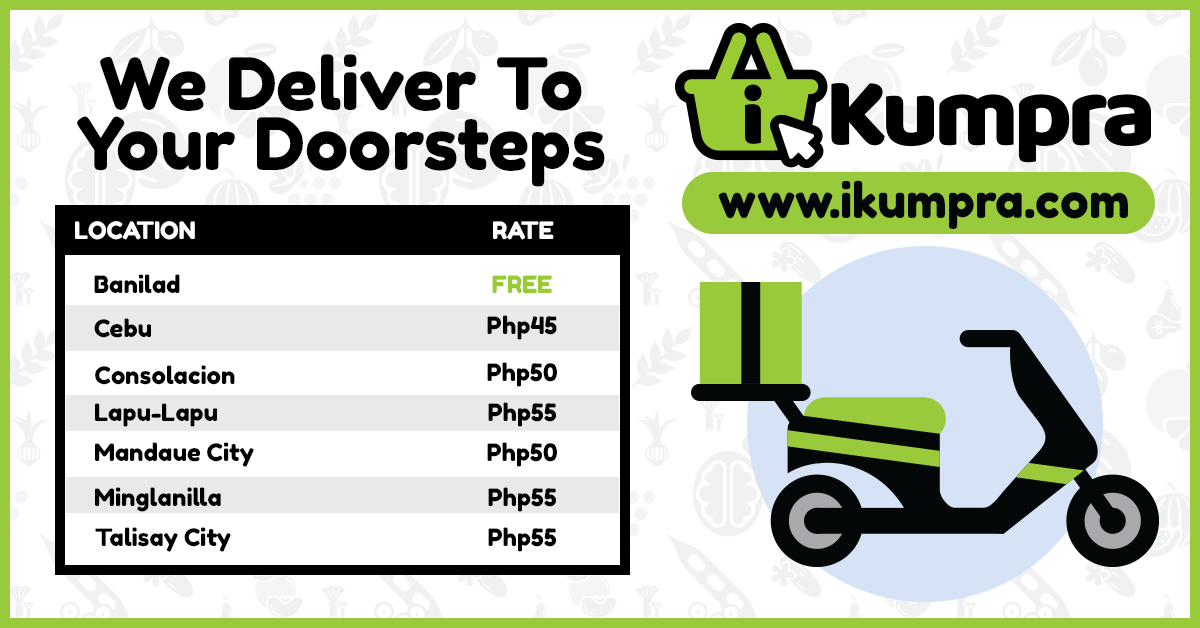
<style>
.page{position:relative;width:1200px;height:628px;background:#ffffff}
.page>*{position:absolute;margin:0}
.t1{font:72px/60px "FredokaOne-Regular";color:#000000}
.t2{font:48px "FredokaOne-Regular";color:#040707}
.t3{font:24px "FredokaOne-Regular";color:#ffffff}
.t4{font:24px "FredokaOne-Regular";color:#000000}
.t5{font:24px "FredokaOne-Regular";color:#99cc33}
</style>
<div class="page">
<p class="t1" style="left:77px;top:54px;width:528px;height:133px;text-align:center">We Deliver To<br>Your Doorsteps</p>
<p class="t2" style="left:718px;top:180px;width:410px;height:49px">www.ikumpra.com</p>
<p class="t3" style="left:75px;top:221px;width:120px;height:19px">LOCATION</p>
<p class="t3" style="left:493px;top:221px;width:61px;height:19px">RATE</p>
<p class="t4" style="left:94px;top:274px;width:86px;height:19px">Banilad</p>
<p class="t5" style="left:492px;top:275px;width:60px;height:19px">FREE</p>
<p class="t4" style="left:94px;top:318px;width:57px;height:20px">Cebu</p>
<p class="t4" style="left:487px;top:315px;width:70px;height:25px">Php45</p>
<p class="t4" style="left:95px;top:365px;width:140px;height:20px">Consolacion</p>
<p class="t4" style="left:487px;top:362px;width:70px;height:25px">Php50</p>
<p class="t4" style="left:95px;top:403px;width:122px;height:24px">Lapu-Lapu</p>
<p class="t4" style="left:488px;top:402px;width:68px;height:25px">Php55</p>
<p class="t4" style="left:95px;top:442px;width:159px;height:25px">Mandaue City</p>
<p class="t4" style="left:487px;top:442px;width:70px;height:25px">Php50</p>
<p class="t4" style="left:95px;top:487px;width:126px;height:25px">Minglanilla</p>
<p class="t4" style="left:488px;top:487px;width:68px;height:25px">Php55</p>
<p class="t4" style="left:95px;top:527px;width:136px;height:25px">Talisay City</p>
<p class="t4" style="left:488px;top:527px;width:68px;height:25px">Php55</p>
</div>
